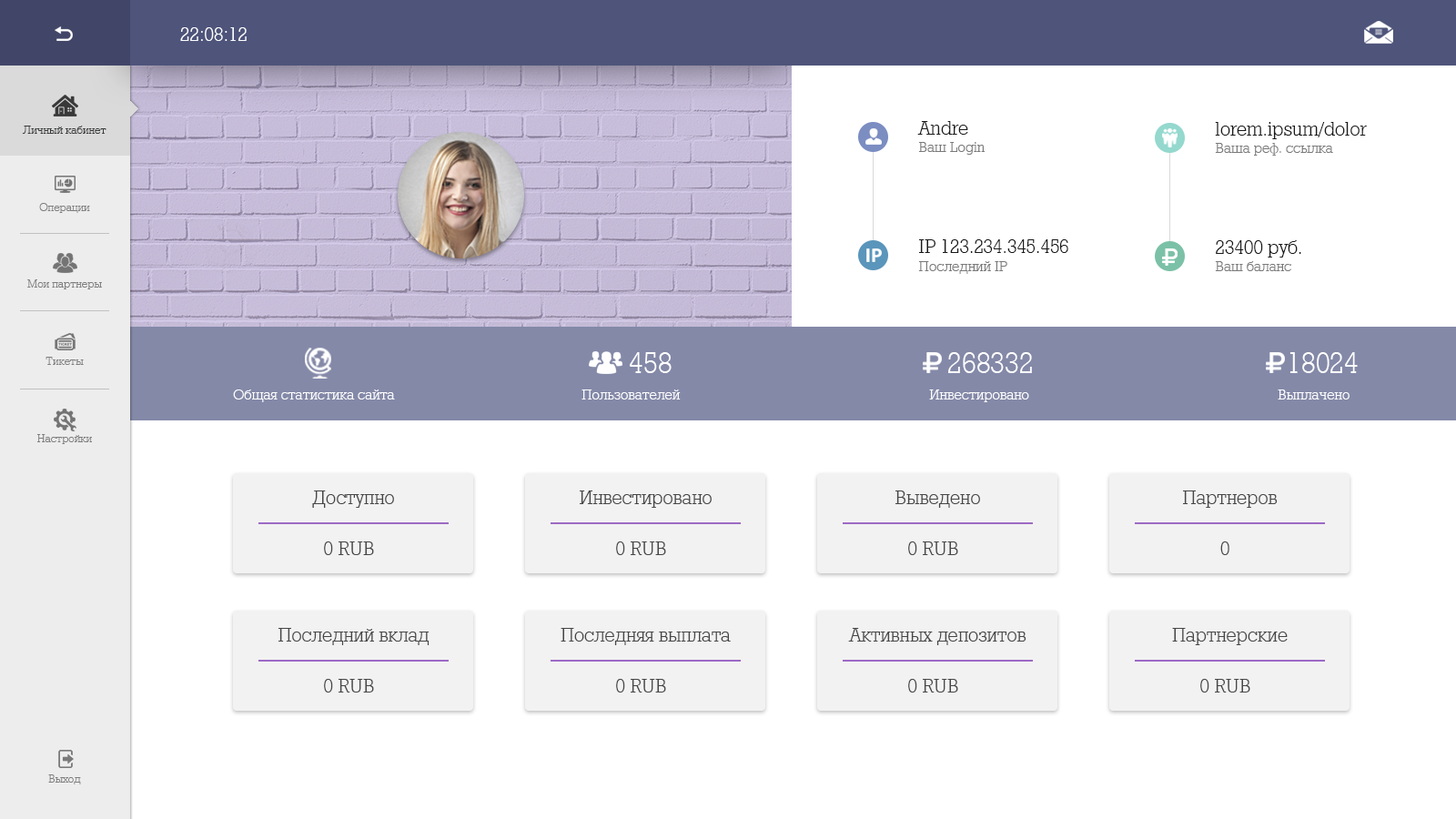
<style>
.page{position:relative;width:1456px;height:819px;background:#ffffff}
.page>*{position:absolute;margin:0}
.t1{font:21.8px "Rodeo95";color:#ffffff}
.t2{font:12.7px "Rodeo95";color:#38393a}
.t3{font:21.8px "Rodeo95";color:#1c1c1c}
.t4{font:21.8px "Rodeo95";color:#191919}
.t5{font:16.4px "Rodeo95";color:#7a7a7a}
.t6{font:12.7px "Rodeo95";color:#7e7e7f}
.t7{font:12.7px "Rodeo95";color:#7e7e7e}
.t8{font:32.8px "Rodeo95";color:#ffffff}
.t9{font:16.4px "Rodeo95";color:#ffffff}
.t10{font:21.8px "Rodeo95";color:#464646}
</style>
<div class="page">
<p class="t1" style="left:180px;top:27px;width:67px;height:14px">22:08:12</p>
<p class="t2" style="left:22px;top:126px;width:84px;height:8px">Личный кабинет</p>
<p class="t3" style="left:917px;top:121px;width:51px;height:14px">Andre</p>
<p class="t4" style="left:1215px;top:122px;width:152px;height:17px">lorem.ipsum/dolor</p>
<p class="t5" style="left:918px;top:142px;width:67px;height:13px">Ваш Login</p>
<p class="t5" style="left:1215px;top:143px;width:118px;height:13px">Ваша реф. ссылка</p>
<p class="t6" style="left:39px;top:203px;width:51px;height:10px">Операции</p>
<p class="t4" style="left:919px;top:239px;width:149px;height:14px">IP 123.234.345.456</p>
<p class="t4" style="left:1216px;top:240px;width:85px;height:18px">23400 руб.</p>
<p class="t5" style="left:918px;top:261px;width:89px;height:13px">Последний IP</p>
<p class="t5" style="left:1215px;top:261px;width:76px;height:10px">Ваш баланс</p>
<p class="t7" style="left:27px;top:279px;width:75px;height:10px">Мои партнеры</p>
<p class="t8" style="left:629px;top:352px;width:43px;height:21px">458</p>
<p class="t8" style="left:948px;top:352px;width:84px;height:21px">268332</p>
<p class="t8" style="left:1289px;top:352px;width:69px;height:21px">18024</p>
<p class="t7" style="left:45px;top:357px;width:39px;height:8px">Тикеты</p>
<p class="t9" style="left:233px;top:389px;width:162px;height:13px">Общая статистика сайта</p>
<p class="t9" style="left:581px;top:389px;width:100px;height:10px">Пользователей</p>
<p class="t9" style="left:929px;top:389px;width:100px;height:13px">Инвестировано</p>
<p class="t9" style="left:1278px;top:389px;width:72px;height:10px">Выплачено</p>
<p class="t7" style="left:37px;top:434px;width:55px;height:10px">Настройки</p>
<p class="t10" style="left:312px;top:490px;width:82px;height:18px">Доступно</p>
<p class="t10" style="left:580px;top:490px;width:132px;height:18px">Инвестировано</p>
<p class="t10" style="left:895px;top:490px;width:85px;height:18px">Выведено</p>
<p class="t10" style="left:1183px;top:490px;width:95px;height:18px">Партнеров</p>
<p class="t10" style="left:324px;top:541px;width:50px;height:14px">0 RUB</p>
<p class="t10" style="left:616px;top:541px;width:50px;height:14px">0 RUB</p>
<p class="t10" style="left:908px;top:541px;width:50px;height:14px">0 RUB</p>
<p class="t10" style="left:1220px;top:541px;width:9px;height:14px">0</p>
<p class="t10" style="left:278px;top:628px;width:152px;height:17px">Последний вклад</p>
<p class="t10" style="left:561px;top:628px;width:170px;height:17px">Последняя выплата</p>
<p class="t10" style="left:848px;top:628px;width:178px;height:17px">Активных депозитов</p>
<p class="t10" style="left:1172px;top:628px;width:116px;height:17px">Партнерские</p>
<p class="t10" style="left:324px;top:679px;width:50px;height:14px">0 RUB</p>
<p class="t10" style="left:616px;top:679px;width:50px;height:14px">0 RUB</p>
<p class="t10" style="left:908px;top:679px;width:50px;height:14px">0 RUB</p>
<p class="t10" style="left:1200px;top:679px;width:50px;height:14px">0 RUB</p>
<p class="t7" style="left:48px;top:774px;width:33px;height:10px">Выход</p>
</div>
